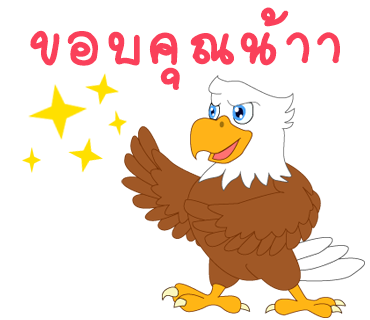
<style>
.page{position:relative;width:370px;height:320px;background:#ffffff}
.page>*{position:absolute;margin:0}
.t1{font:90px "2005_iannnnnMTV";letter-spacing:0.04em;color:#fa405a;scale:1.06 1}
</style>
<div class="page">
<p class="t1" style="left:30px;top:7px;width:310px;height:83px">ขอบคุณน้าา</p>
</div>
